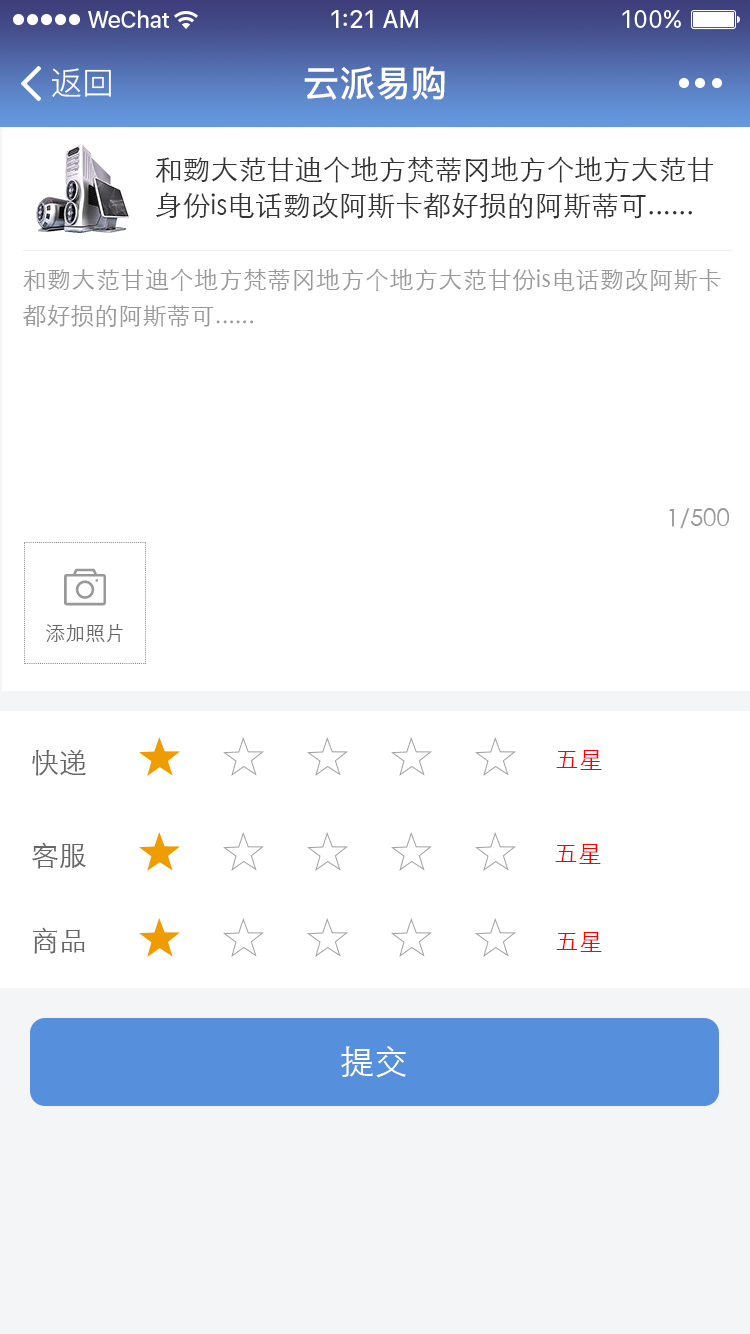
<style>
.page{position:relative;width:750px;height:1334px;background:#ffffff}
.page>*{position:absolute;margin:0}
.t1{font:32px "PingFang-SC-Regular";color:#ffffff}
.t2{font:36px "PingFang-SC-Bold";color:#ffffff}
.t3{font:28px/36px "STXihei";color:#333333}
.t4{font:24px/36px "STXihei";color:#999999}
.t5{font:24px "STXihei";color:#999999}
.t6{font:20px "STXihei";color:#666666}
.t7{font:28px "STXihei";color:#666666}
.t8{font:24px "STXihei";color:#ff0000}
.t9{font:34px "STXihei";color:#ffffff}
</style>
<div class="page">
<p class="t1" style="left:52px;top:68px;width:59px;height:29px">返回</p>
<p class="t2" style="left:304px;top:66px;width:141px;height:34px">云派易购</p>
<p class="t3" style="left:155px;top:156px;width:559px;height:63px;text-align:justify">和覅大范甘迪个地方梵蒂冈地方个地方大范甘<br>身份is电话覅改阿斯卡都好损的阿斯蒂可......</p>
<p class="t4" style="left:23px;top:268px;width:698px;height:59px;text-align:justify">和覅大范甘迪个地方梵蒂冈地方个地方大范甘份is电话覅改阿斯卡都好损的阿斯蒂可......</p>
<p class="t5" style="left:669px;top:508px;width:61px;height:21px">1/500</p>
<p class="t6" style="left:46px;top:624px;width:77px;height:19px">添加照片</p>
<p class="t7" style="left:32px;top:749px;width:54px;height:27px">快递</p>
<p class="t8" style="left:556px;top:750px;width:46px;height:20px">五星</p>
<p class="t7" style="left:32px;top:842px;width:54px;height:27px">客服</p>
<p class="t8" style="left:555px;top:844px;width:46px;height:20px">五星</p>
<p class="t7" style="left:33px;top:927px;width:52px;height:27px">商品</p>
<p class="t8" style="left:556px;top:932px;width:46px;height:20px">五星</p>
<p class="t9" style="left:341px;top:1046px;width:65px;height:32px">提交</p>
</div>
